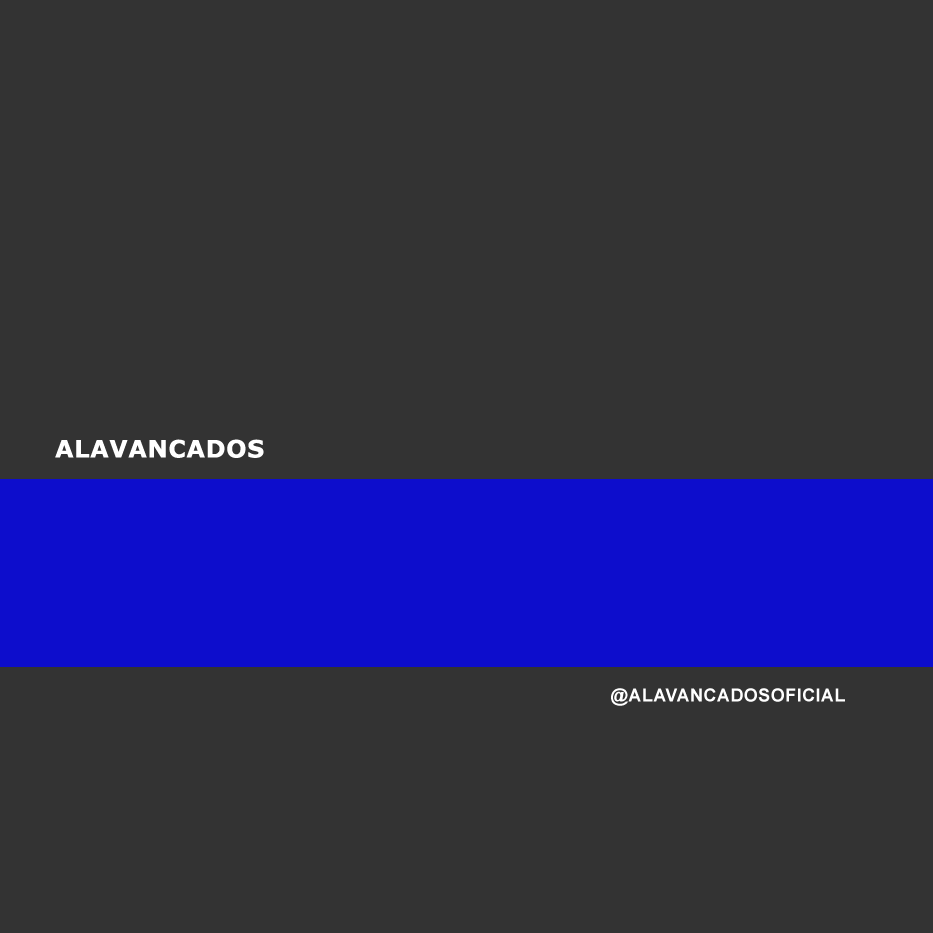
<style>
.page{position:relative;width:933px;height:933px;background:#333333}
.page>*{position:absolute;margin:0}
.t1{font:24px "Verdana-Bold";letter-spacing:0.025em;color:#ffffff}
.t2{font:18px "Arial-BoldMT";letter-spacing:0.025em;color:#ffffff}
</style>
<div class="page">
<p class="t1" style="left:55px;top:439px;width:209px;height:19px">ALAVANCADOS</p>
<p class="t2" style="left:611px;top:688px;width:234px;height:18px">@ALAVANCADOSOFICIAL</p>
</div>
